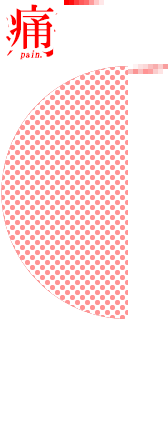
<style>
.page{position:relative;width:168px;height:448px;background:#ffffff}
.page>*{position:absolute;margin:0}
.t1{font:10px/14px "HGMinchoB";color:#ff0000;font-style:italic}
.t2{font:48px/14px "HGMinchoB";letter-spacing:0.075em;color:#ff0000}
.t3{font:10px/11px "HGMinchoB";color:#ff0000;font-style:italic}
</style>
<div class="page">
<p class="t1" style="left:9px;top:4px;width:45px;height:56px;text-align:center"><span class="t2">痛<br></span>pain<span class="t3">.</span></p>
</div>
